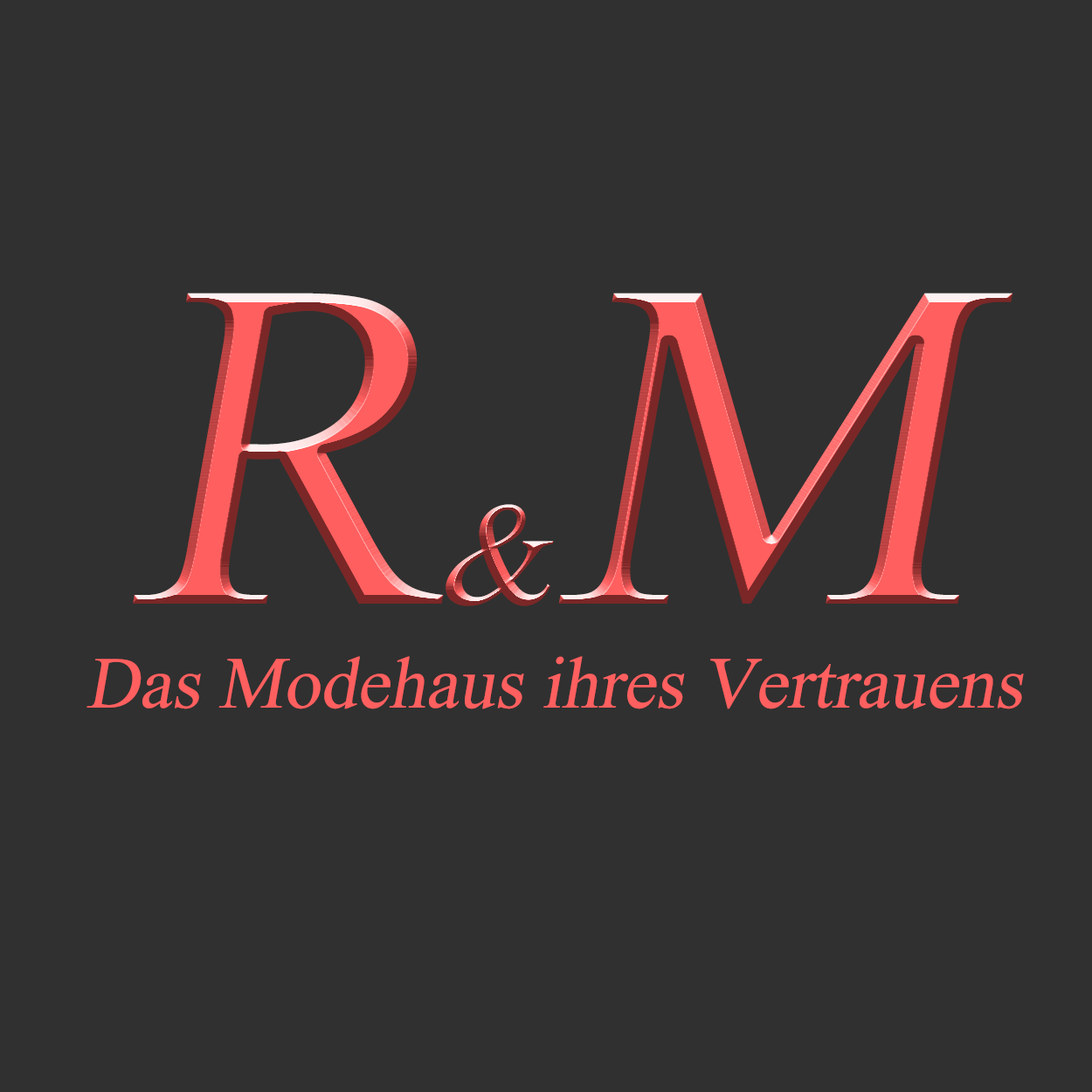
<style>
.page{position:relative;width:1092px;height:1092px;background:#303030}
.page>*{position:absolute;margin:0}
.t1{font:698.9px "Microsoft-Himalaya";font-style:italic}
.t2{font:218.4px "Microsoft-Himalaya";font-style:italic}
.t3{font:109.2px "Microsoft-Himalaya";color:#ff5f5f;font-style:italic}
</style>
<div class="page">
<p class="t1" style="left:133px;top:293px;width:879px;height:313px">R<span class="t2">&amp;</span>M</p>
<p class="t3" style="left:86px;top:656px;width:938px;height:53px">Das Modehaus ihres Vertrauens</p>
</div>
